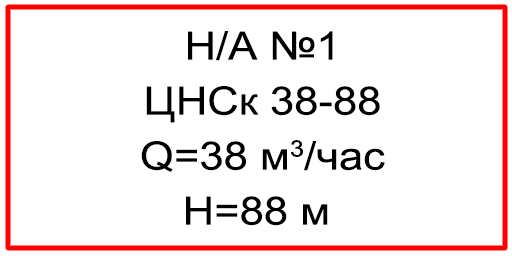
<style>
.page{position:relative;width:512px;height:256px;background:#ffffff}
.page>*{position:absolute;margin:0}
.t1{font:39.1px/55px "ArialMT";color:#000000;scale:1.12 1}
</style>
<div class="page">
<p class="t1" style="left:141px;top:31px;width:244px;height:195px;text-align:center">Н/А №1<br>ЦНСк 38-88<br>Q=38 м3/час<br>Н=88 м</p>
</div>
